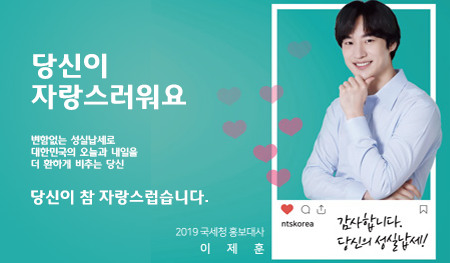
<style>
.page{position:relative;width:450px;height:263px}
.page>*{position:absolute;margin:0}
.t1{font:26px "Daum_SemiBold";color:#ffffff}
.t2{font:10px "LHM";color:#ffffff}
.t3{font:15px "Daum_SemiBold";color:#ffffff}
</style>
<div class="page">
<p class="t1" style="left:31px;top:53px;width:155px;height:57px">당신이<br>자랑스러워요</p>
<p class="t2" style="left:31px;top:135px;width:107px;height:35px">변함없는 성실납세로<br>대한민국의 오늘과 내일을<br>더 환하게 비추는 당신</p>
<p class="t3" style="left:31px;top:190px;width:177px;height:15px">당신이 참 자랑스럽습니다.</p>
</div>
